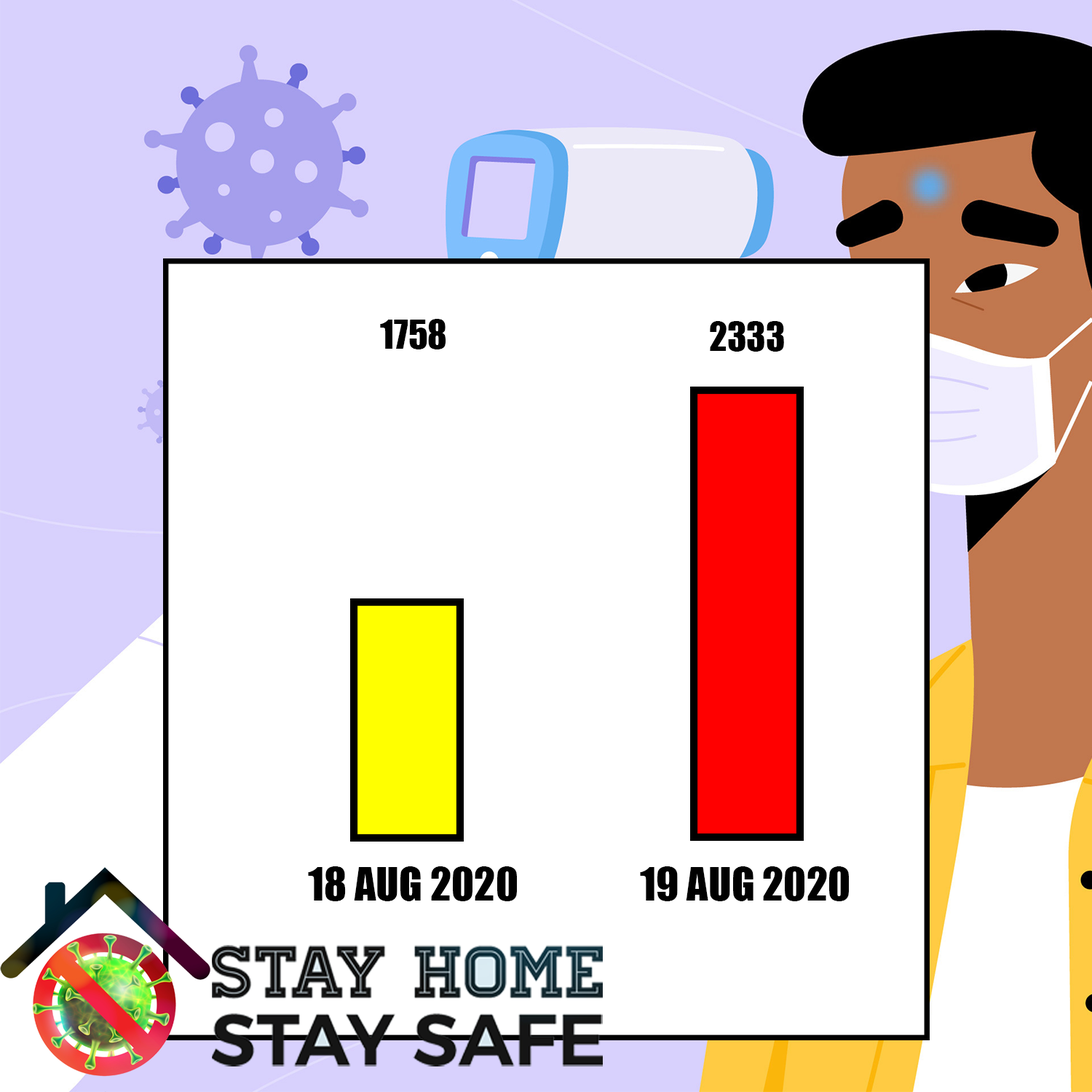
<style>
.page{position:relative;width:1092px;height:1092px;background:#ffffff}
.page>*{position:absolute;margin:0}
.t1{font:36.3px "Impact";color:#010101}
.t2{font:42.5px "Impact";color:#010101}
</style>
<div class="page">
<p class="t1" style="left:380px;top:319px;width:66px;height:30px">1758</p>
<p class="t1" style="left:710px;top:321px;width:74px;height:31px">2333</p>
<p class="t2" style="left:308px;top:866px;width:209px;height:35px">18 AUG 2020</p>
<p class="t2" style="left:640px;top:866px;width:209px;height:35px">19 AUG 2020</p>
</div>
